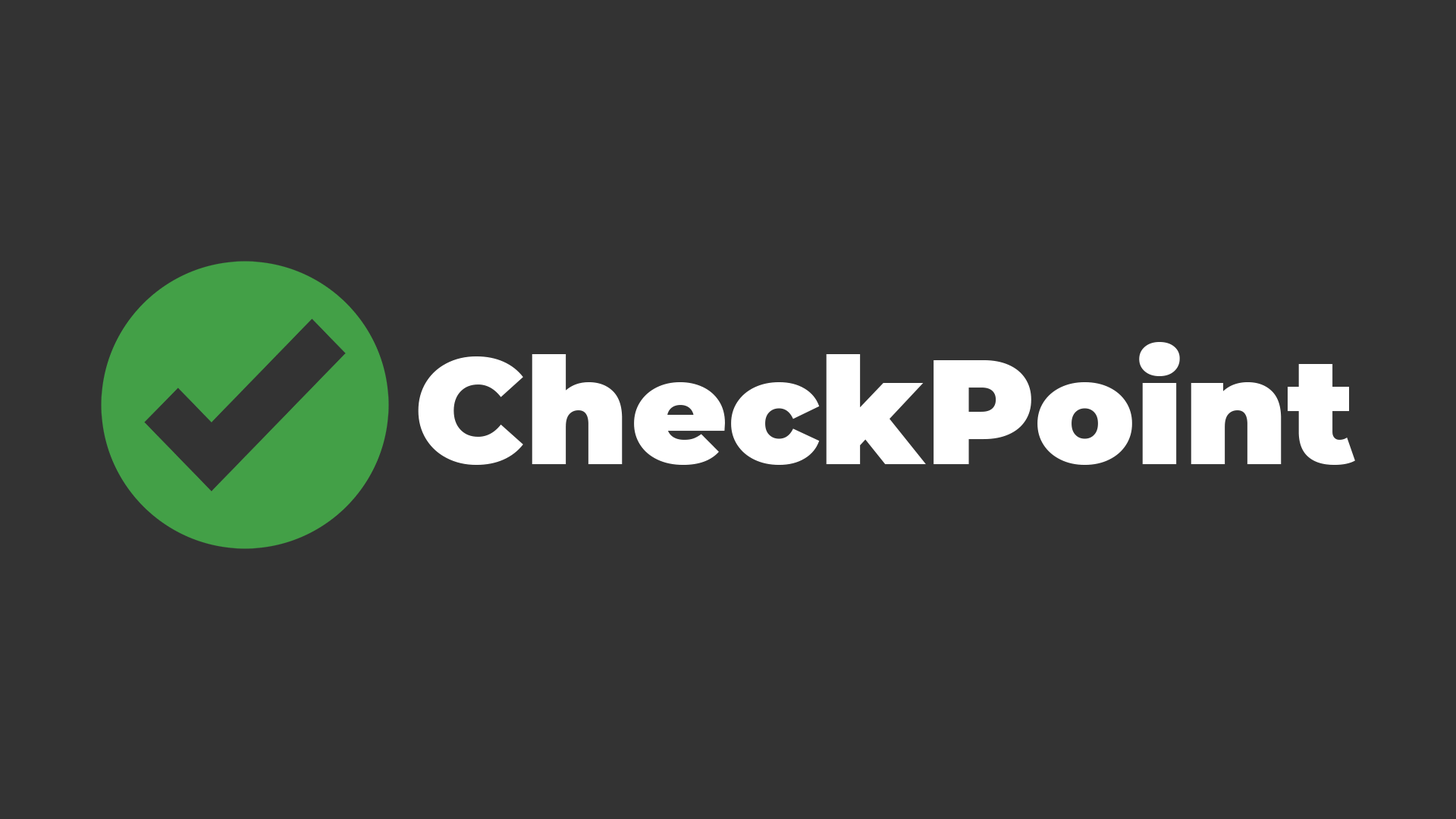
<style>
.page{position:relative;width:1456px;height:819px;background:#333333}
.page>*{position:absolute;margin:0}
.t1{font:148.7px "Montserrat-Black";color:#ffffff}
</style>
<div class="page">
<p class="t1" style="left:418px;top:342px;width:937px;height:123px">CheckPoint</p>
</div>
